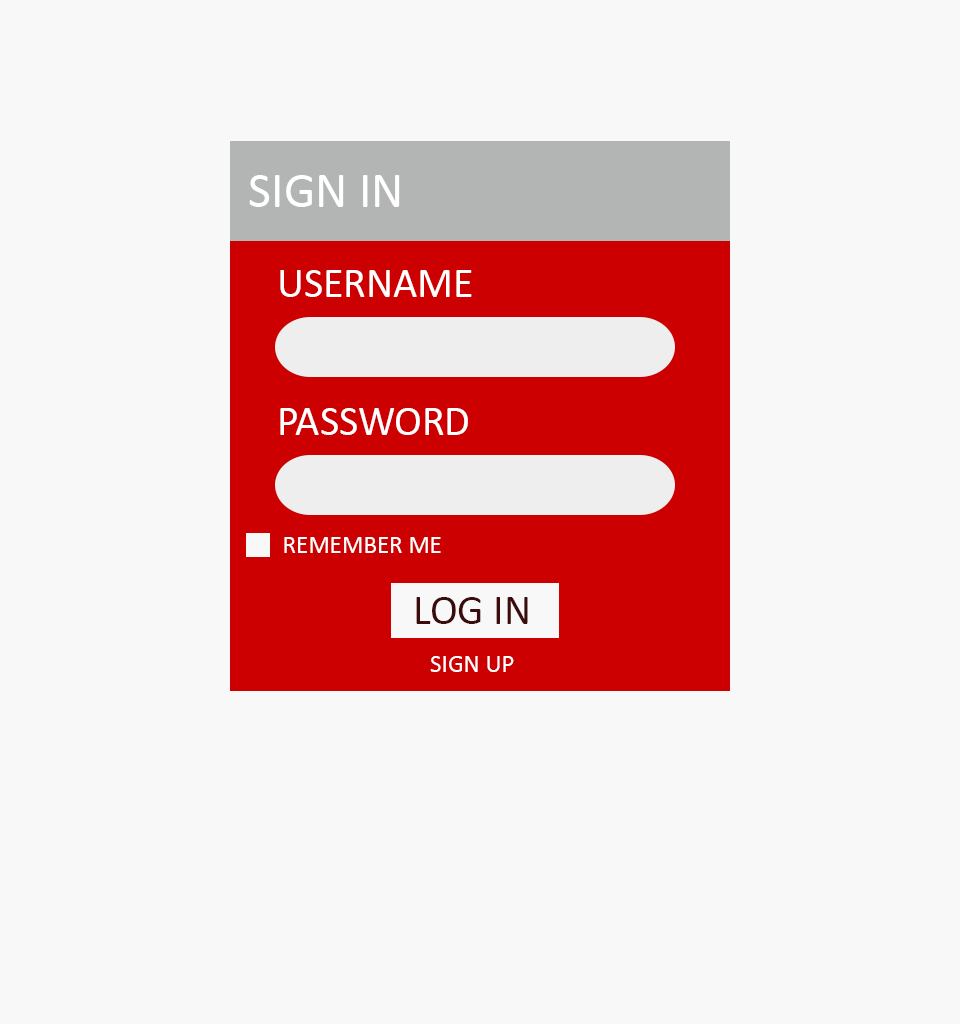
<style>
.page{position:relative;width:960px;height:1024px;background:#f8f8f8}
.page>*{position:absolute;margin:0}
.t1{font:12px "Calibri";color:#ffffff}
.t2{font:41.7px "Calibri";color:#ffffff}
.t3{font:25px "Calibri";color:#ffffff}
.t4{font:41.7px "Calibri";color:#3c0c0c}
</style>
<div class="page">
<p class="t1" style="left:249px;top:175px;width:151px;height:32px;text-align:right">SIGN IN</p>
<p class="t2" style="left:280px;top:270px;width:192px;height:27px">USERNAME</p>
<p class="t2" style="left:280px;top:408px;width:188px;height:27px">PASSWORD</p>
<p class="t3" style="left:284px;top:537px;width:157px;height:16px">REMEMBER ME</p>
<p class="t4" style="left:416px;top:597px;width:112px;height:27px">LOG IN</p>
<p class="t3" style="left:430px;top:656px;width:84px;height:16px">SIGN UP</p>
</div>
